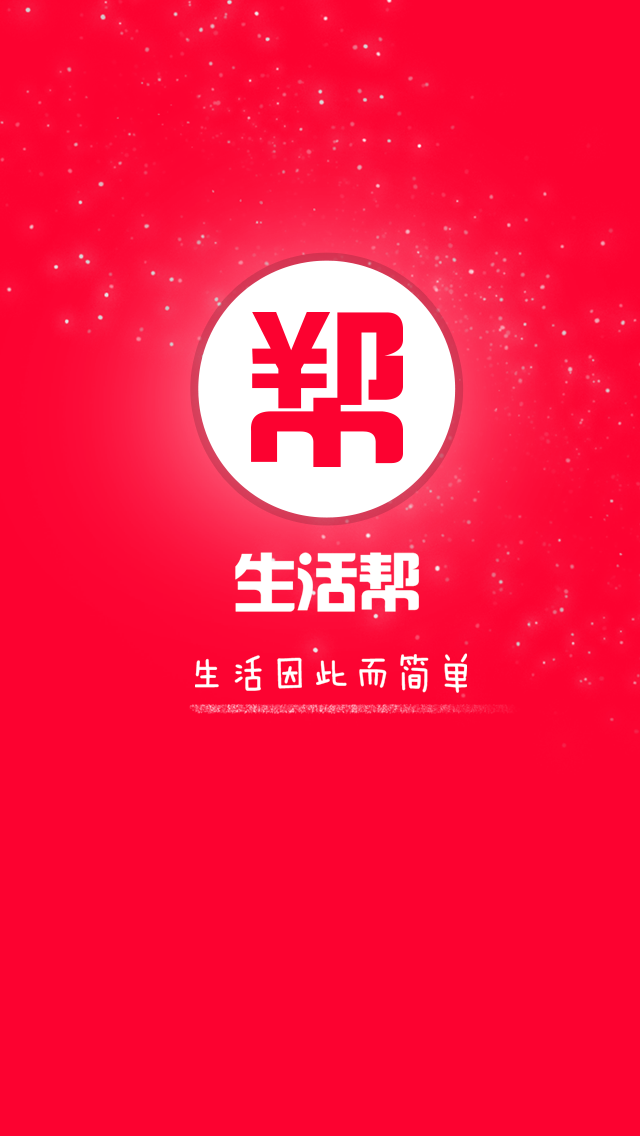
<style>
.page{position:relative;width:640px;height:1136px;background:#fc0230}
.page>*{position:absolute;margin:0}
.t1{font:62.4px "FZHZGBJW--GB1-0";color:#ffffff}
.t2{font:41.6px "FZMWJW--GB1-0";color:#ffffff}
</style>
<div class="page">
<p class="t1" style="left:235px;top:552px;width:184px;height:60px">生活帮</p>
<p class="t2" style="left:195px;top:653px;width:272px;height:40px">生活因此而简单</p>
</div>
